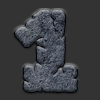
<style>
.page{position:relative;width:100px;height:100px;background:#333333}
.page>*{position:absolute;margin:0}
.t1{font:100px "JFRockSolid"}
</style>
<div class="page">
<p class="t1" style="left:15px;top:10px;width:62px;height:82px">1</p>
</div>
